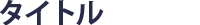
<style>
.page{position:relative;width:200px;height:25px;background:#ffffff}
.page>*{position:absolute;margin:0}
.t1{font:29px "KozGoPro-Bold";letter-spacing:-0.1em;color:#282c48}
</style>
<div class="page">
<p class="t1" style="left:0px;top:0px;width:104px;height:26px">タイトル</p>
</div>
